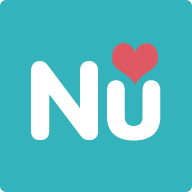
<style>
.page{position:relative;width:192px;height:192px;background:#34b3bc}
.page>*{position:absolute;margin:0}
.t1{font:106.9px "FZY4JW--GB1-0";color:#ffffff;font-weight:bold}
</style>
<div class="page">
<p class="t1" style="left:31px;top:61px;width:130px;height:80px">Nu</p>
</div>
